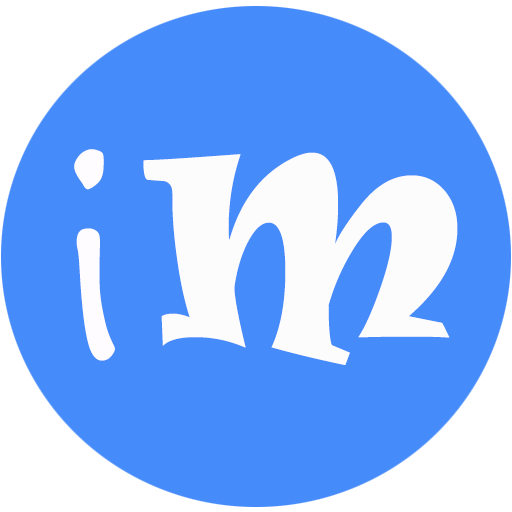
<style>
.page{position:relative;width:512px;height:512px;background:#468bfa}
.page>*{position:absolute;margin:0}
.t1{font:250px "SegoePrint";color:#fefcfe}
.t2{font:250px "Ravie";color:#fdfcfd}
</style>
<div class="page">
<p class="t1" style="left:74px;top:149px;width:41px;height:212px;rotate:-14deg">i</p>
<p class="t2" style="left:143px;top:152px;width:315px;height:213px">M</p>
</div>
